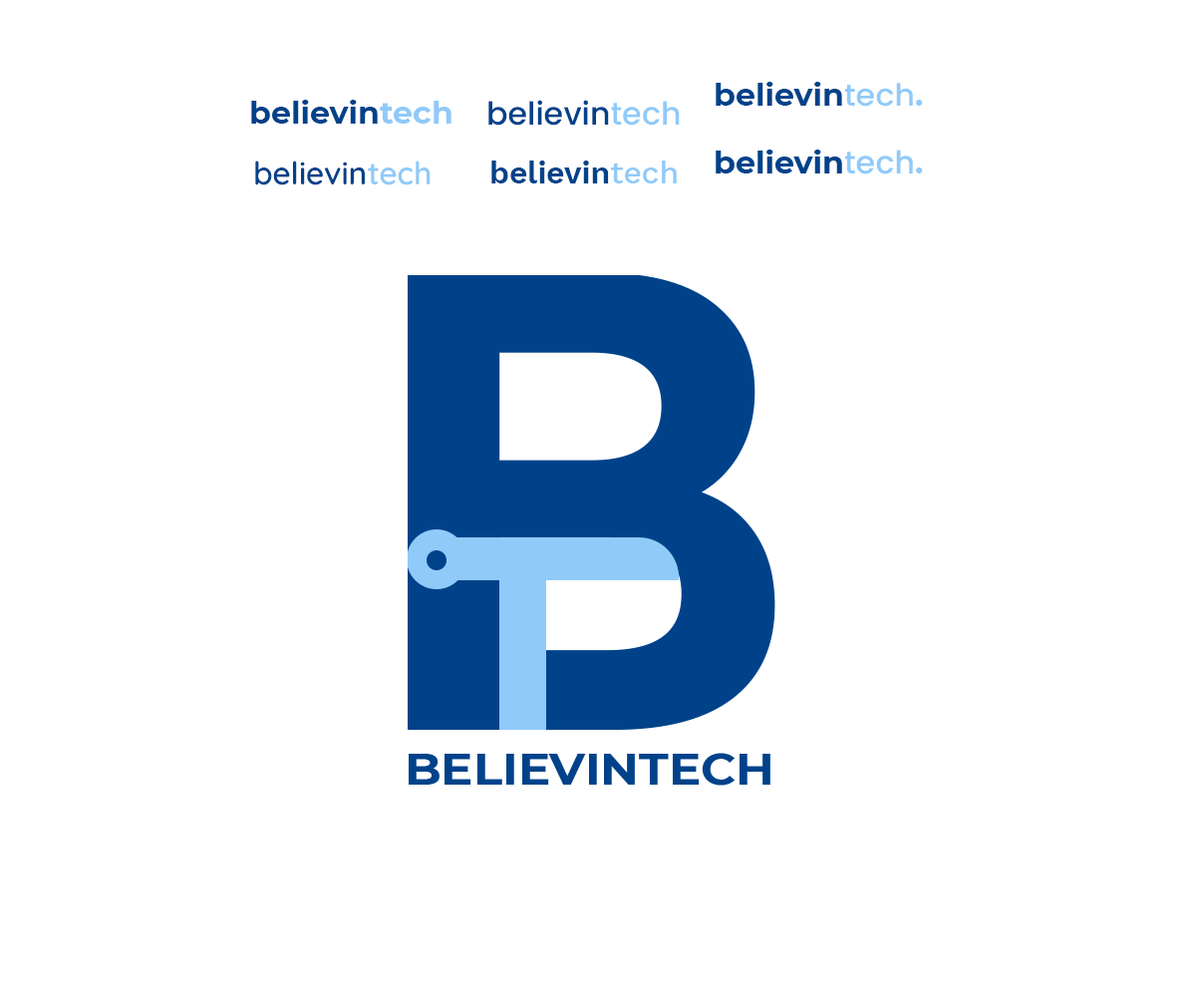
<style>
.page{position:relative;width:1196px;height:997px;background:#ffffff}
.page>*{position:absolute;margin:0}
.t1{font:30.6px "Montserrat-Bold";color:#00428a;scale:1.03 1}
.t2{font:30.6px "Poppins-Medium";color:#90caf9;scale:1.03 1}
.t3{font:30.6px "Montserrat-Bold";color:#90caf9;scale:1.03 1}
.t4{font:31.6px "Montserrat-Bold";color:#00428a}
.t5{font:31.6px "Montserrat-Bold";color:#90caf9}
.t6{font:31.6px "Poppins-Medium";color:#00428a}
.t7{font:31.6px "Poppins-Medium";color:#90caf9}
.t8{font:31.6px "Quicksand-SemiBold";color:#00428a}
.t9{font:31.6px "Quicksand-SemiBold";color:#90caf9}
.t10{font:31.6px "WorkSans-SemiBold";color:#00428a}
.t11{font:31.6px "WorkSans-Medium";color:#90caf9}
</style>
<div class="page">
<p class="t1" style="left:716px;top:82px;width:207px;height:25px">believin<span class="t2">tech</span><span class="t3">.</span></p>
<p class="t4" style="left:251px;top:100px;width:201px;height:24px">believin<span class="t5">tech</span></p>
<p class="t6" style="left:488px;top:100px;width:192px;height:26px">believin<span class="t7">tech</span></p>
<p class="t8" style="left:255px;top:160px;width:176px;height:25px">believin<span class="t9">tech</span></p>
<p class="t10" style="left:491px;top:160px;width:186px;height:23px">believin<span class="t11">tech</span></p>
</div>
